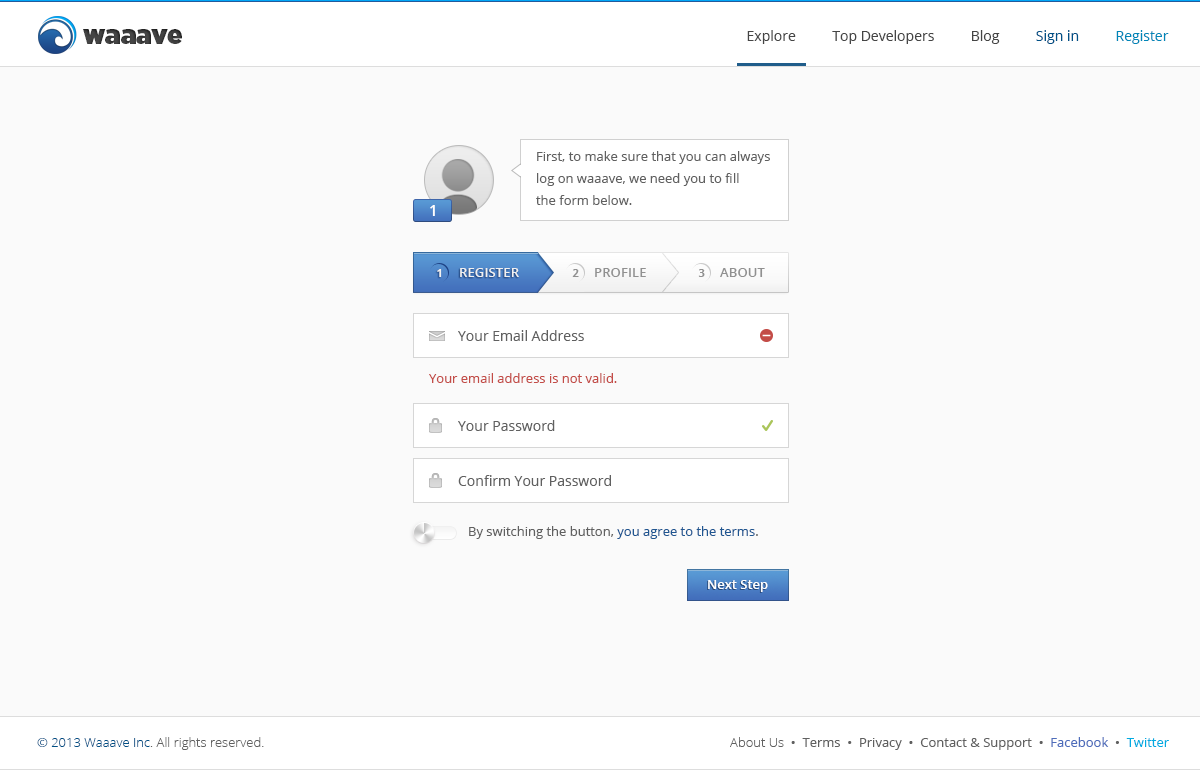
<style>
.page{position:relative;width:1200px;height:770px;background:#fafafa}
.page>*{position:absolute;margin:0}
.t1{font:25.9px "Gotham-Ultra";color:#454545}
.t2{font:14px "OpenSans";color:#454545}
.t3{font:14px "OpenSans";color:#005086}
.t4{font:14px "OpenSans";color:#0086b8}
.t5{font:13px/22px "OpenSans";color:#606060}
.t6{font:15px "OpenSans-Semibold";color:#fefefe}
.t7{font:11px "OpenSans-Bold";letter-spacing:0.01em;color:#f1f1f1}
.t8{font:13px "OpenSans-Semibold";letter-spacing:0.01em;color:#f1f1f1}
.t9{font:11px "OpenSans-Bold";letter-spacing:0.01em;color:#909090}
.t10{font:13px "OpenSans-Semibold";letter-spacing:0.01em;color:#909090}
.t11{font:14px "OpenSans";color:#606060}
.t12{font:13px "OpenSans";color:#c34c47}
.t13{font:13px "OpenSans";color:#606060}
.t14{font:13px "OpenSans";color:#1f5691}
.t15{font:13px "OpenSans-Semibold";color:#ffffff}
.t16{font:13px "OpenSans-Light";color:#606060}
.t17{font:13px "OpenSans-Light";color:#005086}
.t18{font:13px "OpenSans";color:#4e6dbb}
.t19{font:13px "OpenSans";color:#01abe1}
</style>
<div class="page">
<p class="t1" style="left:83px;top:29px;width:99px;height:15px">waaave</p>
<p class="t2" style="left:747px;top:30px;width:422px;height:14px">Explore          Top Developers          Blog          <span class="t3">Sign in          </span><span class="t4">Register</span></p>
<p class="t5" style="left:536px;top:151px;width:234px;height:54px">First, to make sure that you can always<br>log on waaave, we need you to fill<br>the form below.</p>
<p class="t6" style="left:430px;top:205px;width:5px;height:11px">1</p>
<p class="t7" style="left:437px;top:269px;width:5px;height:8px">1</p>
<p class="t8" style="left:460px;top:268px;width:59px;height:9px">REGISTER</p>
<p class="t9" style="left:572px;top:269px;width:7px;height:8px">2</p>
<p class="t10" style="left:595px;top:268px;width:51px;height:9px">PROFILE</p>
<p class="t9" style="left:698px;top:269px;width:7px;height:8px">3</p>
<p class="t10" style="left:720px;top:268px;width:45px;height:9px">ABOUT</p>
<p class="t11" style="left:458px;top:330px;width:126px;height:11px">Your Email Address</p>
<p class="t12" style="left:429px;top:373px;width:188px;height:10px">Your email address is not valid.</p>
<p class="t11" style="left:458px;top:420px;width:97px;height:11px">Your Password</p>
<p class="t11" style="left:458px;top:475px;width:153px;height:11px">Confirm Your Password</p>
<p class="t13" style="left:469px;top:526px;width:289px;height:13px">By switching the button, <span class="t14">you agree to the terms</span>.</p>
<p class="t15" style="left:708px;top:580px;width:60px;height:12px">Next Step</p>
<p class="t16" style="left:37px;top:737px;width:227px;height:13px"><span class="t17">© 2013 Waaave Inc</span>. All rights reserved.</p>
<p class="t13" style="left:730px;top:737px;width:439px;height:13px"><span class="t16">About Us  </span>•  Terms  •  Privacy  •  Contact &amp; Support  •  <span class="t18">Facebook</span>  •  <span class="t19">Twitter</span></p>
</div>
